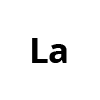
<style>
.page{position:relative;width:100px;height:100px;background:#ffffff}
.page>*{position:absolute;margin:0}
.t1{font:35px "OpenSans-Bold";color:#000000}
</style>
<div class="page">
<p class="t1" style="left:32px;top:38px;width:35px;height:25px">La</p>
</div>
